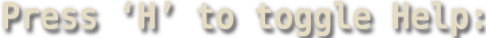
<style>
.page{position:relative;width:486px;height:38px;background:#ffffff}
.page>*{position:absolute;margin:0}
.t1{font:36px "Menlo-Bold";color:#e6dcc1;scale:0.9 1}
</style>
<div class="page">
<p class="t1" style="left:3px;top:1px;width:479px;height:35px">Press ‘H’ to toggle Help:</p>
</div>
